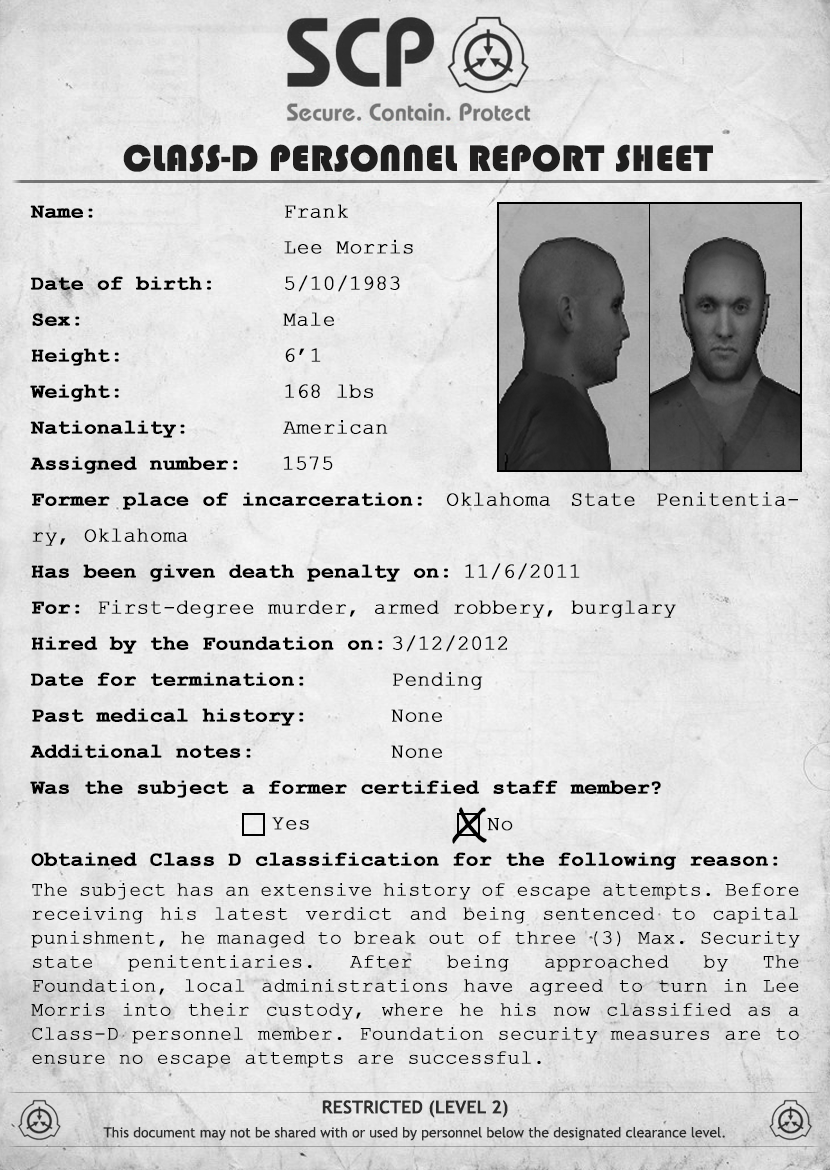
<style>
.page{position:relative;width:830px;height:1170px}
.page>*{position:absolute;margin:0}
.t1{font:38px "Bauhaus93";letter-spacing:-0.01em;color:#222121;font-weight:bold}
.t2{font:21px/36px "CourierNewPS-BoldMT";color:#000000;font-weight:bold}
.t3{font:21px/36px "CourierNewPSMT";color:#000000;font-weight:bold}
.t4{font:21px "CourierNewPSMT";color:#000000;font-weight:bold}
.t5{font:48px "SegoeScript";color:#000000}
.t6{font:20px/24px "CourierNewPSMT";color:#000000;font-weight:bold}
.t7{font:14px/24px "TrebuchetMS";color:#333333}
.t8{font:18px/24px "TrebuchetMS-Bold";color:#333333;text-transform:uppercase}
</style>
<div class="page">
<p class="t1" style="left:123px;top:144px;width:590px;height:28px">CLASS-D PERSONNEL REPORT SHEET</p>
<p class="t2" style="left:30px;top:204px;width:768px;height:666px;text-align:justify">Name:      <span class="t3">Frank<br>      <br></span>Date of birth:  <span class="t3">5/10/1983<br></span>Sex:      <span class="t3">Male<br></span>Height:     <span class="t3">6’1<br></span>Weight:<span class="t3">     168 lbs<br></span>Nationality:<span class="t3">   American<br></span>Assigned number:      <span class="t3">1575<br></span>Former place of incarceration:<span class="t3">  Oklahoma State Penitentiary, Oklahoma<br></span>Has been given death penalty on:<span class="t3"> 11/6/2011<br></span>For:<span class="t3"> First-degree murder, armed robbery, burglary<br></span>Hired by the Foundation on: <span class="t3">3/12/2012<br></span>Date for termination:   <span class="t3">Pending<br></span>Past medical history:   <span class="t3">None<br></span>Additional notes:    <span class="t3">None<br></span>Was the subject a former certified staff member?<br> <br>Obtained Class D classification for the following reason:</p>
<p class="t4" style="left:284px;top:239px;width:129px;height:15px">Lee Morris</p>
<p class="t5" style="left:452px;top:807px;width:35px;height:37px">X</p>
<p class="t4" style="left:272px;top:817px;width:37px;height:13px">Yes</p>
<p class="t4" style="left:487px;top:818px;width:26px;height:13px">No</p>
<p class="t6" style="left:31px;top:883px;width:769px;height:185px;text-align:justify">The subject has an extensive history of escape attempts. Before receiving his latest verdict and being sentenced to capital punishment, he managed to break out of three (3) Max. Security state penitentiaries. After being approached by The Foundation, local administrations have agreed to turn in Lee Morris into their custody, where he his now classified as a Class-D personnel member. Foundation security measures are to ensure no escape attempts are successful.</p>
<p class="t7" style="left:103px;top:1100px;width:622px;height:41px;text-align:center"><span class="t8">Restricted (level 2)<br></span>This document may not be shared with or used by personnel below the designated clearance level.</p>
</div>
